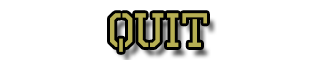
<style>
.page{position:relative;width:310px;height:60px;background:#ffffff}
.page>*{position:absolute;margin:0}
.t1{font:48px "OctinPrisonFree";color:#b7af53}
</style>
<div class="page">
<p class="t1" style="left:110px;top:13px;width:97px;height:39px">QUIT</p>
</div>
